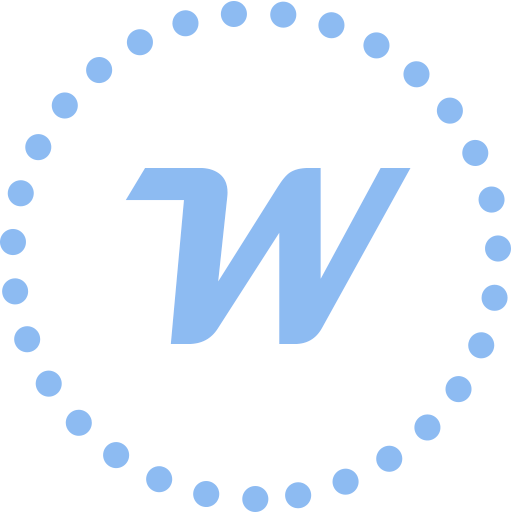
<style>
.page{position:relative;width:512px;height:512px;background:#ffffff}
.page>*{position:absolute;margin:0}
.t1{font:256px "Magneto-Bold";color:#8dbbf2}
</style>
<div class="page">
<p class="t1" style="left:125px;top:168px;width:286px;height:176px">W</p>
</div>
